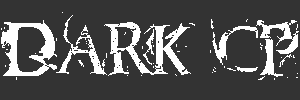
<style>
.page{position:relative;width:300px;height:100px;background:#333333}
.page>*{position:absolute;margin:0}
.t1{font:60px "Blasphemy";color:#ffffff}
</style>
<div class="page">
<p class="t1" style="left:1px;top:12px;width:298px;height:68px">Dark CP</p>
</div>
